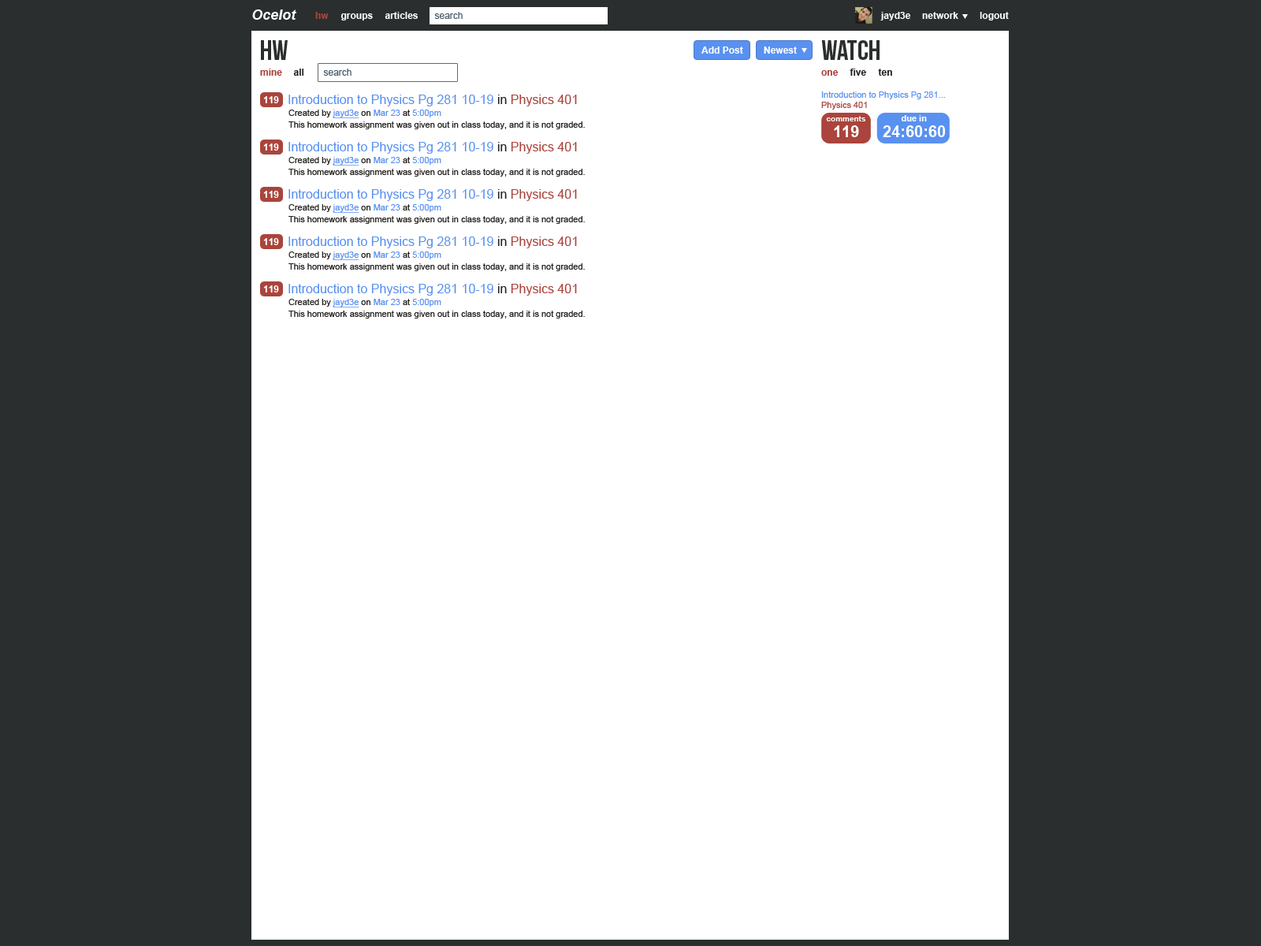
<style>
.page{position:relative;width:1261px;height:946px;background:#ffffff}
.page>*{position:absolute;margin:0}
.t1{font:14.2px "Arial-BoldItalicMT";color:#ffffff}
.t2{font:9.5px "Arial-BoldMT";color:#aa443c}
.t3{font:9.5px "Arial-BoldMT";color:#ffffff}
.t4{font:9.5px "ArialMT";color:#4b5f6d}
.t5{font:28.4px "BebasNeue";color:#2b2e2e}
.t6{font:9.5px "Arial-BoldMT";color:#24221f}
.t7{font:12.6px "ArialMT";color:#5991f1}
.t8{font:12.6px "ArialMT";color:#24221f}
.t9{font:12.6px "ArialMT";color:#aa443c}
.t10{font:8.7px "ArialMT";color:#5991f1}
.t11{font:8.7px "ArialMT";color:#aa443c}
.t12{font:8.7px "ArialMT";color:#24221f}
.t13{font:8.7px "ArialMT";color:#5991f1;text-decoration:underline}
.t14{font:7.9px "Arial-BoldMT";color:#ffffff}
.t15{font:15.8px "Arial-BoldMT";color:#ffffff}
.t16{font:8.7px "Arial-BoldMT";color:#ffffff}
</style>
<div class="page">
<p class="t1" style="left:252px;top:9px;width:44px;height:11px">Ocelot</p>
<p class="t2" style="left:315px;top:12px;width:14px;height:7px">hw</p>
<p class="t3" style="left:340px;top:13px;width:33px;height:7px">groups</p>
<p class="t3" style="left:385px;top:12px;width:33px;height:7px">articles</p>
<p class="t4" style="left:434px;top:12px;width:29px;height:7px">search</p>
<p class="t3" style="left:880px;top:12px;width:31px;height:8px">jayd3e</p>
<p class="t3" style="left:922px;top:12px;width:36px;height:7px">network</p>
<p class="t3" style="left:980px;top:12px;width:29px;height:8px">logout</p>
<p class="t5" style="left:261px;top:40px;width:27px;height:20px">hw</p>
<p class="t5" style="left:821px;top:40px;width:58px;height:20px">watch</p>
<p class="t3" style="left:701px;top:46px;width:42px;height:8px">Add Post</p>
<p class="t3" style="left:764px;top:46px;width:33px;height:8px">Newest</p>
<p class="t2" style="left:260px;top:69px;width:22px;height:7px">mine</p>
<p class="t6" style="left:293px;top:69px;width:11px;height:7px">all</p>
<p class="t4" style="left:323px;top:69px;width:28px;height:7px">search</p>
<p class="t2" style="left:821px;top:70px;width:18px;height:6px">one</p>
<p class="t6" style="left:850px;top:69px;width:16px;height:7px">five</p>
<p class="t6" style="left:878px;top:69px;width:14px;height:7px">ten</p>
<p class="t3" style="left:263px;top:96px;width:16px;height:7px">119</p>
<p class="t7" style="left:288px;top:95px;width:289px;height:11px">Introduction to Physics Pg 281 10-19<span class="t8"> in </span><span class="t9">Physics 401</span></p>
<p class="t10" style="left:821px;top:91px;width:124px;height:8px">Introduction to Physics Pg 281...</p>
<p class="t11" style="left:821px;top:102px;width:46px;height:8px">Physics 401</p>
<p class="t12" style="left:288px;top:110px;width:153px;height:8px">Created by <span class="t13">jayd3e </span>on <span class="t10">Mar 23 </span>at <span class="t10">5:00pm</span></p>
<p class="t12" style="left:288px;top:121px;width:297px;height:8px">This homework assignment was given out in class today, and it is not graded.</p>
<p class="t14" style="left:826px;top:116px;width:40px;height:5px">comments</p>
<p class="t15" style="left:834px;top:125px;width:25px;height:12px">119</p>
<p class="t15" style="left:883px;top:125px;width:63px;height:12px">24:60:60</p>
<p class="t16" style="left:901px;top:115px;width:26px;height:6px">due in</p>
<p class="t3" style="left:263px;top:143px;width:16px;height:8px">119</p>
<p class="t7" style="left:288px;top:142px;width:289px;height:12px">Introduction to Physics Pg 281 10-19<span class="t8"> in </span><span class="t9">Physics 401</span></p>
<p class="t12" style="left:288px;top:157px;width:153px;height:8px">Created by <span class="t13">jayd3e </span>on <span class="t10">Mar 23 </span>at <span class="t10">5:00pm</span></p>
<p class="t12" style="left:288px;top:169px;width:297px;height:8px">This homework assignment was given out in class today, and it is not graded.</p>
<p class="t3" style="left:263px;top:191px;width:16px;height:7px">119</p>
<p class="t7" style="left:288px;top:189px;width:289px;height:12px">Introduction to Physics Pg 281 10-19<span class="t8"> in </span><span class="t9">Physics 401</span></p>
<p class="t12" style="left:288px;top:204px;width:153px;height:9px">Created by <span class="t13">jayd3e </span>on <span class="t10">Mar 23 </span>at <span class="t10">5:00pm</span></p>
<p class="t12" style="left:288px;top:216px;width:297px;height:8px">This homework assignment was given out in class today, and it is not graded.</p>
<p class="t3" style="left:263px;top:238px;width:16px;height:7px">119</p>
<p class="t7" style="left:288px;top:236px;width:289px;height:12px">Introduction to Physics Pg 281 10-19<span class="t8"> in </span><span class="t9">Physics 401</span></p>
<p class="t12" style="left:288px;top:251px;width:153px;height:9px">Created by <span class="t13">jayd3e </span>on <span class="t10">Mar 23 </span>at <span class="t10">5:00pm</span></p>
<p class="t12" style="left:288px;top:263px;width:297px;height:8px">This homework assignment was given out in class today, and it is not graded.</p>
<p class="t3" style="left:263px;top:285px;width:16px;height:7px">119</p>
<p class="t7" style="left:288px;top:284px;width:289px;height:12px">Introduction to Physics Pg 281 10-19<span class="t8"> in </span><span class="t9">Physics 401</span></p>
<p class="t12" style="left:288px;top:299px;width:153px;height:8px">Created by <span class="t13">jayd3e </span>on <span class="t10">Mar 23 </span>at <span class="t10">5:00pm</span></p>
<p class="t12" style="left:288px;top:311px;width:297px;height:7px">This homework assignment was given out in class today, and it is not graded.</p>
</div>
